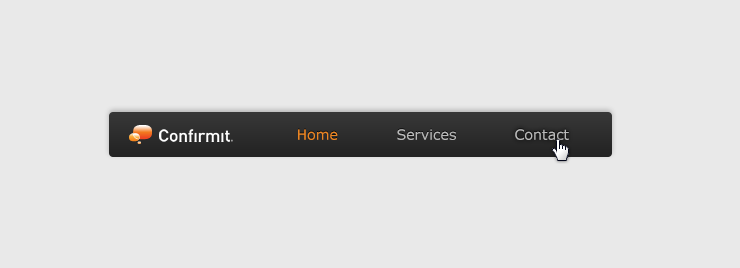
<style>
.page{position:relative;width:740px;height:268px;background:#e9e9e9}
.page>*{position:absolute;margin:0}
.t1{font:14.2px "Verdana";color:#ea8624}
.t2{font:14.2px "Verdana";color:#b9b9b9}
</style>
<div class="page">
<p class="t1" style="left:298px;top:129px;width:40px;height:11px">Home</p>
<p class="t2" style="left:397px;top:129px;width:59px;height:11px">Services</p>
<p class="t2" style="left:515px;top:129px;width:54px;height:11px">Contact</p>
</div>
